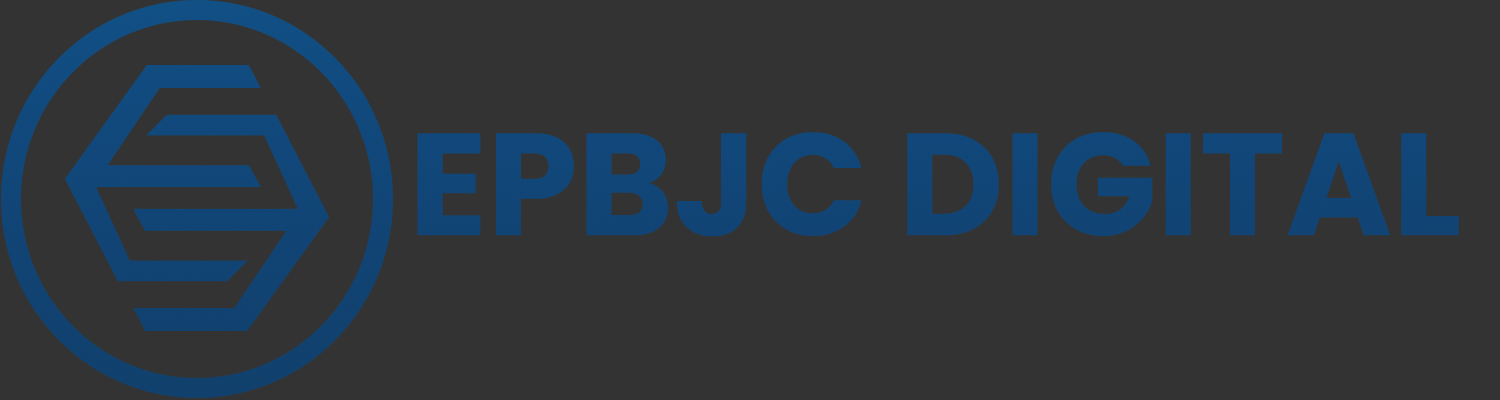
<style>
.page{position:relative;width:1500px;height:400px;background:#333333}
.page>*{position:absolute;margin:0}
.t1{font:145px "Poppins-Bold";color:#114577}
</style>
<div class="page">
<p class="t1" style="left:417px;top:132px;width:1042px;height:105px">EPBJC DIGITAL</p>
</div>
